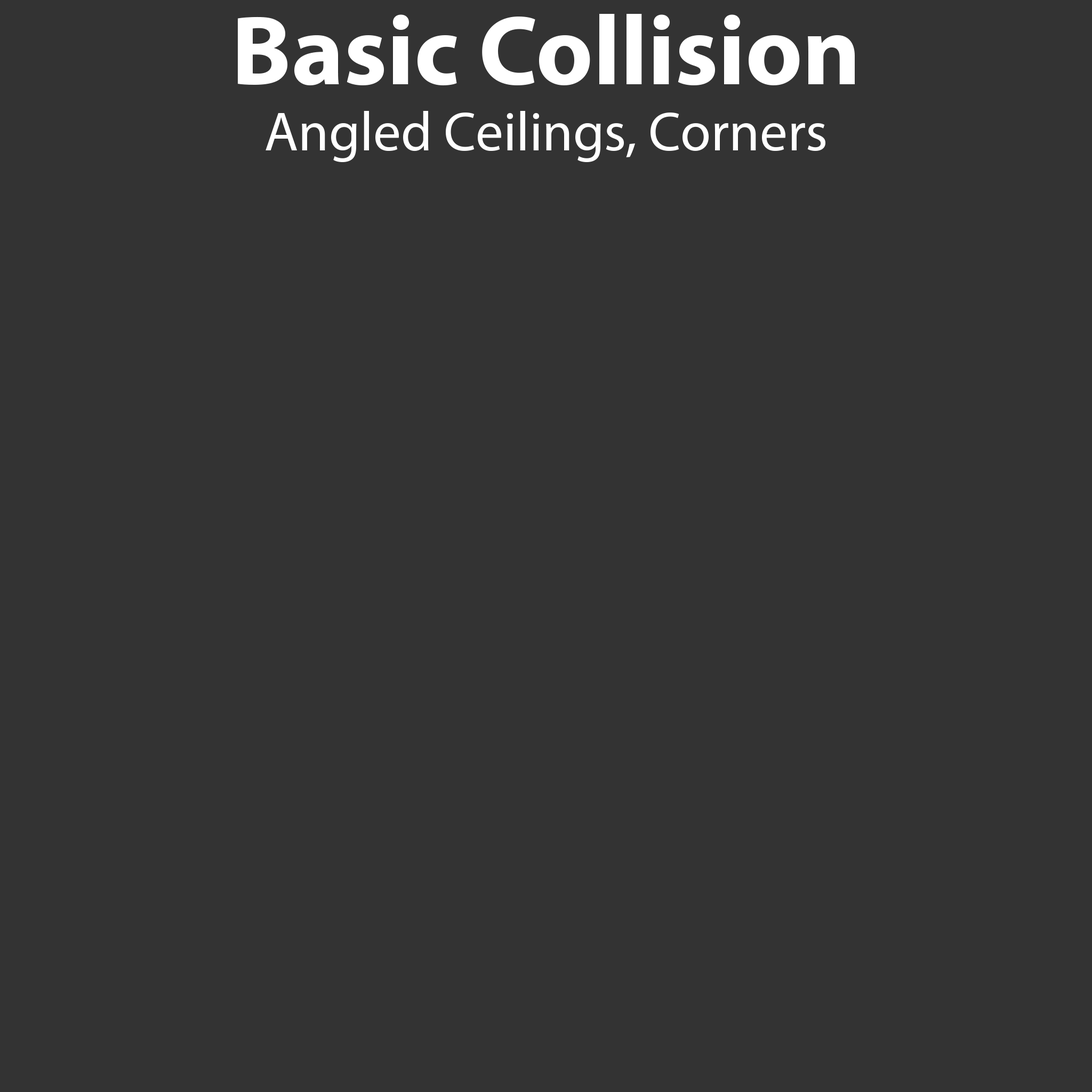
<style>
.page{position:relative;width:1092px;height:1092px;background:#333333}
.page>*{position:absolute;margin:0}
.t1{font:55.5px "MyriadPro-Regular";color:#ffffff}
.t2{font:99.2px "MyriadPro-Bold";color:#ffffff}
</style>
<div class="page">
<p class="t1" style="left:238px;top:14px;width:617px;height:148px;text-align:center"><span class="t2">Basic Collision<br></span>Angled Ceilings, Corners</p>
</div>
